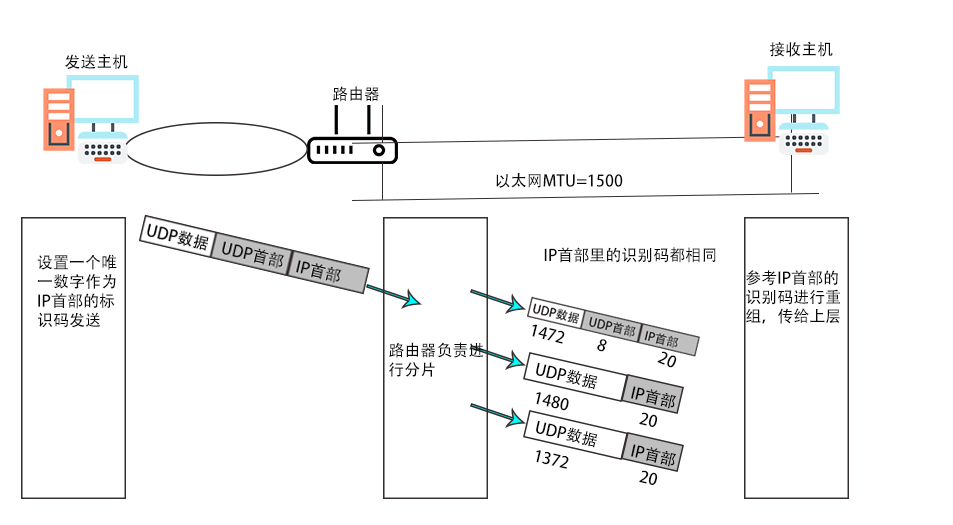
<style>
.page{position:relative;width:953px;height:525px;background:#ffffff}
.page>*{position:absolute;margin:0}
.t1{font:16px "AdobeHeitiStd-Regular";color:#0a0909}
</style>
<div class="page">
<p class="t1" style="left:770px;top:41px;width:63px;height:16px">接收主机</p>
<p class="t1" style="left:65px;top:54px;width:63px;height:15px">发送主机</p>
<p class="t1" style="left:333px;top:86px;width:46px;height:16px">路由器</p>
<p class="t1" style="left:496px;top:172px;width:127px;height:16px">以太网MTU=1500</p>
<p class="t1" style="left:37px;top:254px;width:80px;height:74px">设置一个唯<br>一数字作为<br>IP首部的标<br>识码发送</p>
<p class="t1" style="left:544px;top:247px;width:172px;height:16px">IP首部里的识别码都相同</p>
<p class="t1" style="left:746px;top:270px;width:94px;height:54px">参考IP首部的<br>识别码进行重<br>组，传给上层</p>
<p class="t1" style="left:532px;top:324px;width:33px;height:20px;rotate:14deg">1472</p>
<p class="t1" style="left:389px;top:342px;width:95px;height:35px">路由器负责进<br>行分片</p>
<p class="t1" style="left:597px;top:339px;width:10px;height:13px;rotate:21deg">8</p>
<p class="t1" style="left:657px;top:351px;width:20px;height:17px;rotate:22deg">20</p>
<p class="t1" style="left:536px;top:362px;width:62px;height:28px;rotate:13deg">UDP数据</p>
<p class="t1" style="left:631px;top:386px;width:45px;height:23px;rotate:13deg">IP首部</p>
<p class="t1" style="left:536px;top:392px;width:33px;height:19px;rotate:13deg">1480</p>
<p class="t1" style="left:639px;top:412px;width:19px;height:15px;rotate:13deg">20</p>
<p class="t1" style="left:536px;top:420px;width:62px;height:28px;rotate:13deg">UDP数据</p>
<p class="t1" style="left:631px;top:444px;width:45px;height:23px;rotate:13deg">IP首部</p>
<p class="t1" style="left:536px;top:450px;width:33px;height:19px;rotate:13deg">1372</p>
<p class="t1" style="left:639px;top:470px;width:19px;height:15px;rotate:13deg">20</p>
</div>
